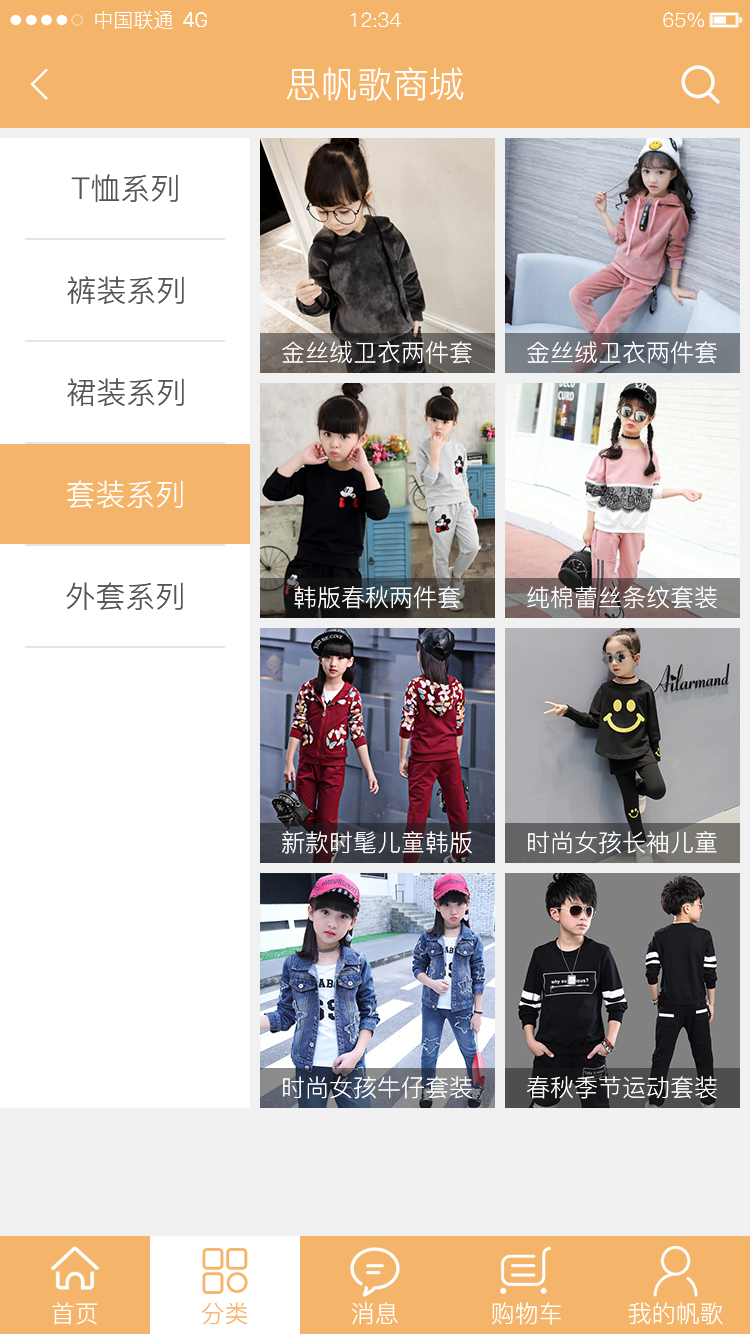
<style>
.page{position:relative;width:750px;height:1334px;background:#ffffff}
.page>*{position:absolute;margin:0}
.t1{font:20px "PingFang-SC-Regular";color:#fefefe}
.t2{font:20px "SanFranciscoDisplay";color:#fefefe}
.t3{font:36px "PingFang-SC-Regular";color:#ffffff}
.t4{font:30px "PingFang-SC-Regular";color:#555555}
.t5{font:24px "PingFang-SC-Regular";color:#ffffff}
.t6{font:30px "PingFang-SC-Regular";color:#fefefe}
.t7{font:24px "PingFang-SC-Regular";color:#fefefe}
.t8{font:24px "PingFang-SC-Regular";color:#f4b469}
</style>
<div class="page">
<p class="t1" style="left:95px;top:11px;width:78px;height:18px">中国联通</p>
<p class="t2" style="left:183px;top:12px;width:24px;height:15px">4G</p>
<p class="t1" style="left:350px;top:12px;width:51px;height:15px">12:34</p>
<p class="t1" style="left:663px;top:12px;width:41px;height:15px">65%</p>
<p class="t3" style="left:286px;top:67px;width:178px;height:34px">思帆歌商城</p>
<p class="t4" style="left:71px;top:174px;width:107px;height:28px">T恤系列</p>
<p class="t4" style="left:67px;top:276px;width:117px;height:28px">裤装系列</p>
<p class="t5" style="left:282px;top:341px;width:190px;height:23px">金丝绒卫衣两件套</p>
<p class="t5" style="left:527px;top:341px;width:190px;height:23px">金丝绒卫衣两件套</p>
<p class="t4" style="left:67px;top:378px;width:117px;height:28px">裙装系列</p>
<p class="t6" style="left:66px;top:480px;width:117px;height:28px">套装系列</p>
<p class="t4" style="left:66px;top:582px;width:117px;height:28px">外套系列</p>
<p class="t5" style="left:294px;top:586px;width:166px;height:23px">韩版春秋两件套</p>
<p class="t5" style="left:527px;top:586px;width:190px;height:23px">纯棉蕾丝条纹套装</p>
<p class="t5" style="left:281px;top:831px;width:191px;height:23px">新款时髦儿童韩版</p>
<p class="t5" style="left:528px;top:831px;width:189px;height:23px">时尚女孩长袖儿童</p>
<p class="t5" style="left:283px;top:1076px;width:189px;height:23px">时尚女孩牛仔套装</p>
<p class="t5" style="left:526px;top:1076px;width:191px;height:23px">春秋季节运动套装</p>
<p class="t7" style="left:52px;top:1302px;width:46px;height:23px">首页</p>
<p class="t8" style="left:201px;top:1302px;width:47px;height:23px">分类</p>
<p class="t7" style="left:351px;top:1302px;width:47px;height:23px">消息</p>
<p class="t7" style="left:491px;top:1302px;width:70px;height:23px">购物车</p>
<p class="t5" style="left:628px;top:1302px;width:95px;height:23px">我的帆歌</p>
</div>
